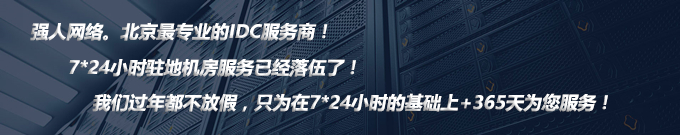
<style>
.page{position:relative;width:680px;height:135px}
.page>*{position:absolute;margin:0}
.t1{font:18px "MicrosoftYaHei-Bold";color:#ffffff;font-style:italic}
</style>
<div class="page">
<p class="t1" style="left:30px;top:22px;width:298px;height:19px">强人网络。北京最专业的IDC服务商！</p>
<p class="t1" style="left:69px;top:58px;width:287px;height:19px">7*24小时驻地机房服务已经落伍了！</p>
<p class="t1" style="left:92px;top:93px;width:516px;height:19px">我们过年都不放假，只为在7*24小时的基础上+365天为您服务！</p>
</div>
